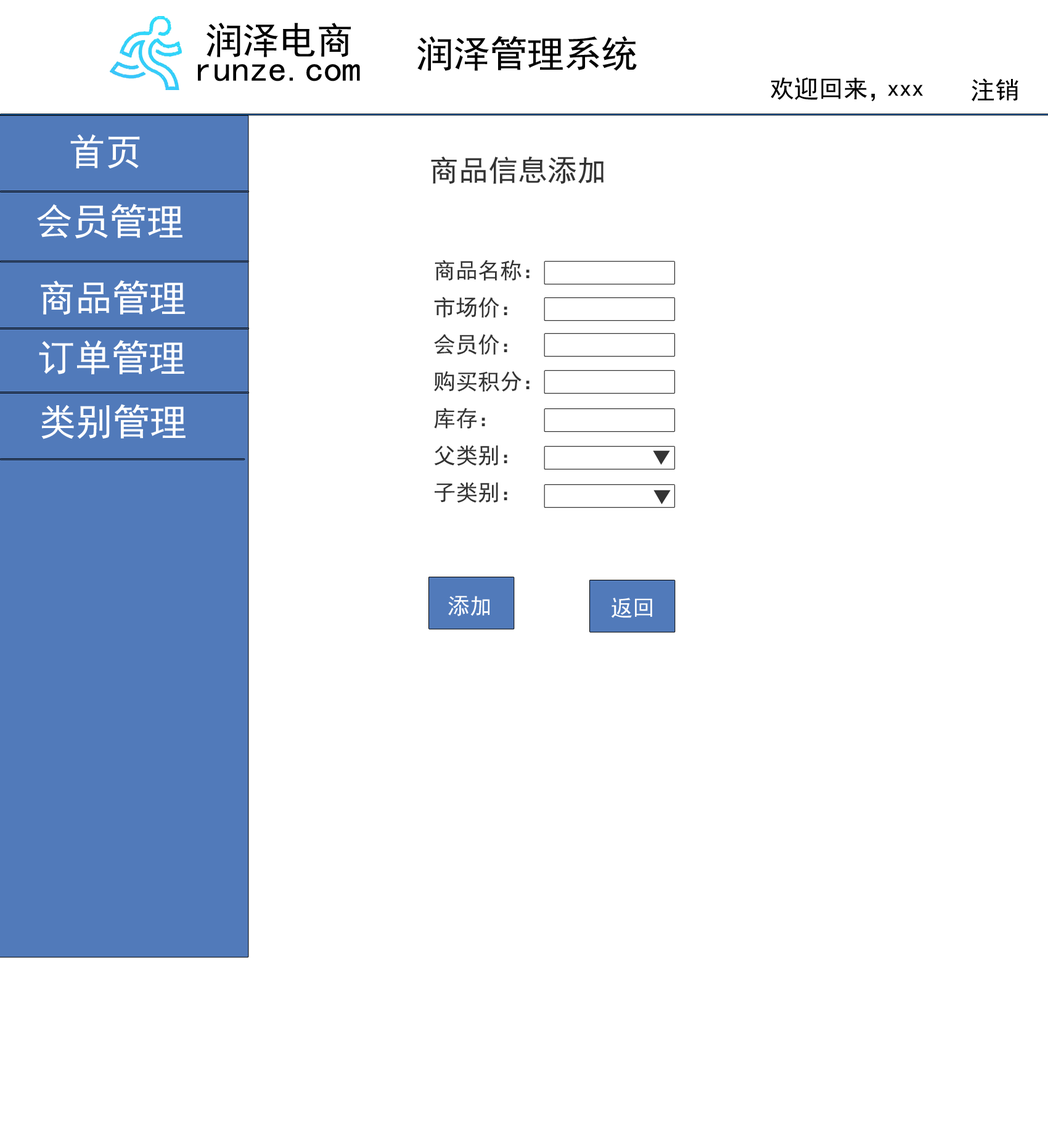
<style>
.page{position:relative;width:1048px;height:1138px;background:#ffffff}
.page>*{position:absolute;margin:0}
.t1{font:37px "SimHei";color:#010101}
.t2{font:24.7px "SimHei";color:#000000}
.t3{font:37px "SimHei";color:#ffffff}
.t4{font:29.6px "SimHei";color:#333333}
.t5{font:22.2px/18.5px "SimHei";color:#333333}
.t6{font:22.2px "SimHei";color:#333333}
.t7{font:22.2px "SimHei";color:#ffffff}
</style>
<div class="page">
<p class="t1" style="left:207px;top:23px;width:144px;height:34px">润泽电商</p>
<p class="t1" style="left:417px;top:36px;width:220px;height:35px">润泽管理系统</p>
<p class="t1" style="left:198px;top:64px;width:162px;height:17px">runze.com</p>
<p class="t2" style="left:771px;top:77px;width:104px;height:24px">欢迎回来，</p>
<p class="t2" style="left:888px;top:84px;width:35px;height:12px">xxx</p>
<p class="t2" style="left:972px;top:78px;width:47px;height:24px">注销</p>
<p class="t3" style="left:70px;top:134px;width:70px;height:34px">首页</p>
<p class="t4" style="left:431px;top:156px;width:173px;height:28px">商品信息添加</p>
<p class="t3" style="left:37px;top:203px;width:146px;height:36px">会员管理</p>
<p class="t5" style="left:434px;top:260px;width:96px;height:243px">商品名称：<br><br>市场价：<br><br>会员价：<br><br>购买积分：<br><br>库存：<br><br>父类别：<br><br>子类别：</p>
<p class="t3" style="left:41px;top:280px;width:144px;height:35px">商品管理</p>
<p class="t3" style="left:39px;top:340px;width:145px;height:34px">订单管理</p>
<p class="t3" style="left:41px;top:404px;width:145px;height:35px">类别管理</p>
<p class="t6" style="left:653px;top:450px;width:17px;height:15px">▼</p>
<p class="t6" style="left:654px;top:490px;width:17px;height:14px">▼</p>
<p class="t7" style="left:448px;top:596px;width:42px;height:20px">添加</p>
<p class="t7" style="left:611px;top:597px;width:41px;height:21px">返回</p>
</div>
